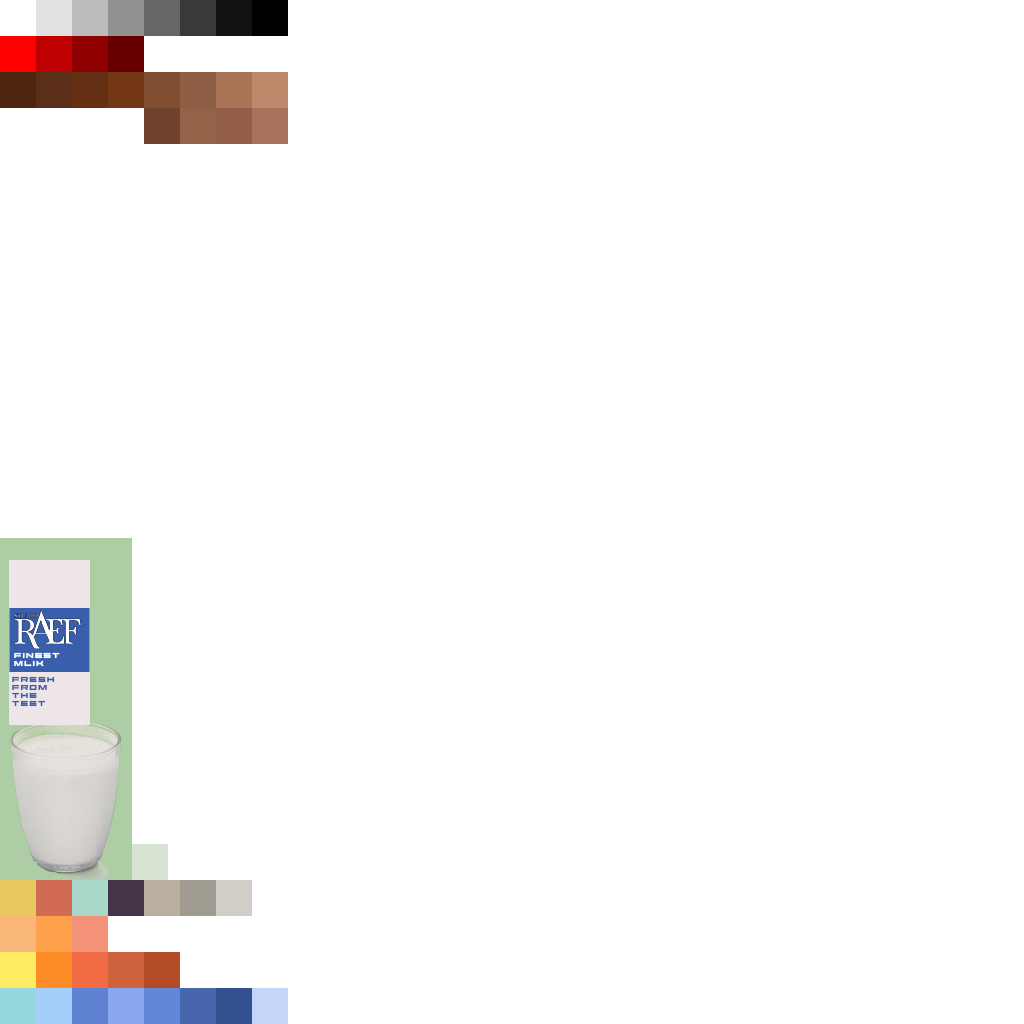
<style>
.page{position:relative;width:1024px;height:1024px;background:#ffffff}
.page>*{position:absolute;margin:0}
.t1{font:12.5px/8.3px "FutureForcesTitle";letter-spacing:-0.24em;color:#ffffff}
.t2{font:12.5px/8.3px "FutureForcesTitle";letter-spacing:-0.24em;color:#395eac}
</style>
<div class="page">
<p class="t1" style="left:14px;top:652px;width:46px;height:15px">Finest <br>Mlik</p>
<p class="t2" style="left:12px;top:676px;width:43px;height:31px">Fresh <br>From<br>The<br>Teet</p>
</div>
